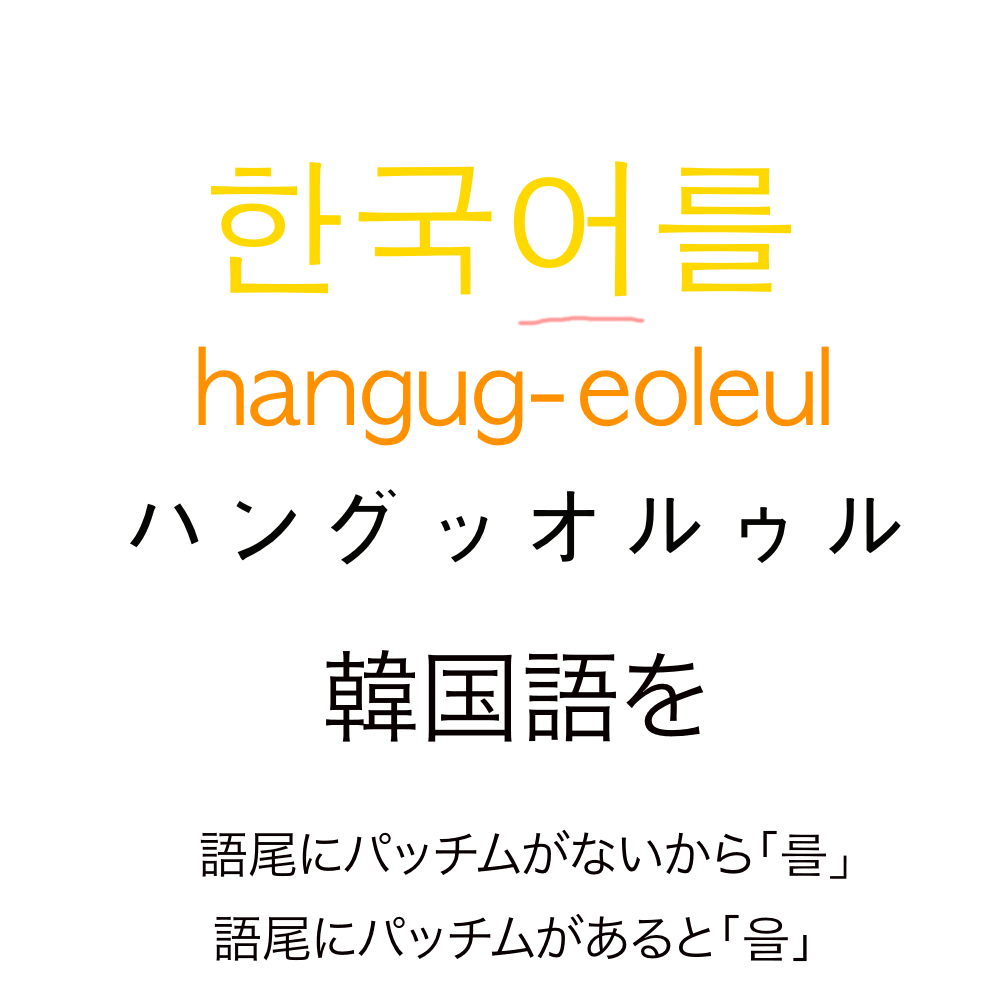
<style>
.page{position:relative;width:1000px;height:1000px;background:#ffffff}
.page>*{position:absolute;margin:0}
.t1{font:150px "AppleGothic";color:#ffd800}
.t2{font:100px "AppleGothic";color:#ff9000}
.t3{font:100px "AppleGothic";color:#060605}
.t4{font:100px "HiraKakuProN-W3";color:#080000}
.t5{font:50px "HiraKakuProN-W3";color:#080000}
.t6{font:50px "AppleGothic";color:#080000}
</style>
<div class="page">
<p class="t1" style="left:211px;top:161px;width:580px;height:136px">한국어를</p>
<p class="t2" style="left:198px;top:346px;width:631px;height:100px">hangug-eoleul</p>
<p class="t3" style="left:130px;top:489px;width:771px;height:76px">ハングッオルゥル</p>
<p class="t4" style="left:326px;top:650px;width:378px;height:92px">韓国語を</p>
<p class="t5" style="left:214px;top:913px;width:593px;height:49px">語尾にパッチムがあると「<span class="t6">을</span>」</p>
</div>
